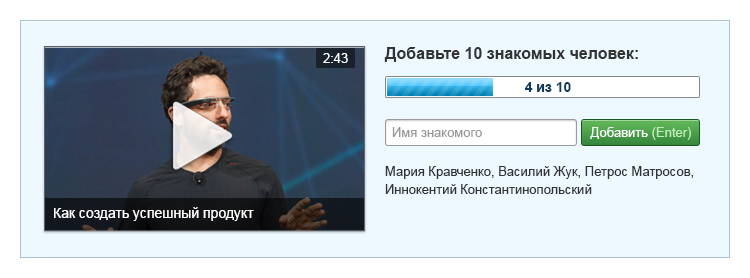
<style>
.page{position:relative;width:750px;height:278px;background:#edf8ff}
.page>*{position:absolute;margin:0}
.t1{font:13px "ArialMT";color:#ffffff}
.t2{font:16px "Arial-BoldMT";color:#333333}
.t3{font:14px "Arial-BoldMT";color:#0e3b5c}
.t4{font:13px "ArialMT";color:#999999}
.t5{font:13px "ArialMT";color:#bbefb8}
.t6{font:13px/18px "ArialMT";color:#333333}
.t7{font:14px "ArialMT";color:#ffffff}
</style>
<div class="page">
<p class="t1" style="left:323px;top:53px;width:25px;height:10px">2:43</p>
<p class="t2" style="left:384px;top:47px;width:254px;height:15px">Добавьте 10 знакомых человек:</p>
<p class="t3" style="left:524px;top:82px;width:47px;height:10px">4 из 10</p>
<p class="t4" style="left:392px;top:127px;width:90px;height:10px">Имя знакомого</p>
<p class="t1" style="left:590px;top:127px;width:101px;height:13px">Добавить<span class="t5"> (Enter)</span></p>
<p class="t6" style="left:385px;top:166px;width:309px;height:28px">Мария Кравченко, Василий Жук, Петрос Матросов, Иннокентий Константинопольский</p>
<p class="t7" style="left:54px;top:207px;width:200px;height:14px">Как создать успешный продукт</p>
</div>
